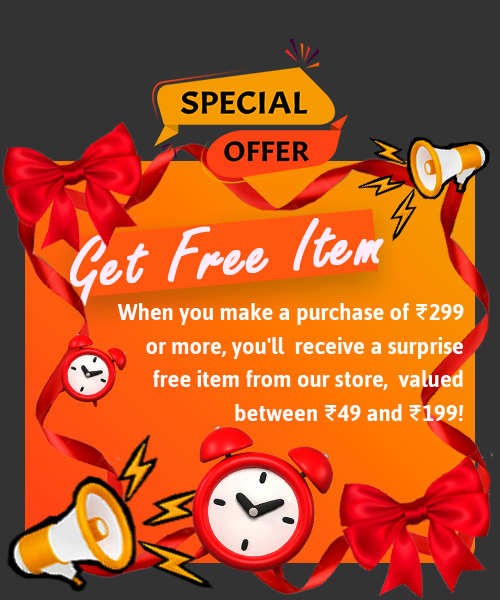
<style>
.page{position:relative;width:500px;height:600px;background:#333333}
.page>*{position:absolute;margin:0}
.t1{font:77.3px "FreestyleScript-Regular";color:#ffffff;font-weight:bold}
.t2{font:24.9px/33.6px "Jaldi-Bold";color:#ffffff}
</style>
<div class="page">
<p class="t1" style="left:70px;top:218px;width:314px;height:88px;rotate:-5deg">Get Free Item</p>
<p class="t2" style="left:117px;top:303px;width:347px;height:118px;text-align:right">When you make a purchase of ₹299<br>or more, you'll  receive a surprise<br>free item from our store,  valued<br> between ₹49 and ₹199!</p>
</div>
